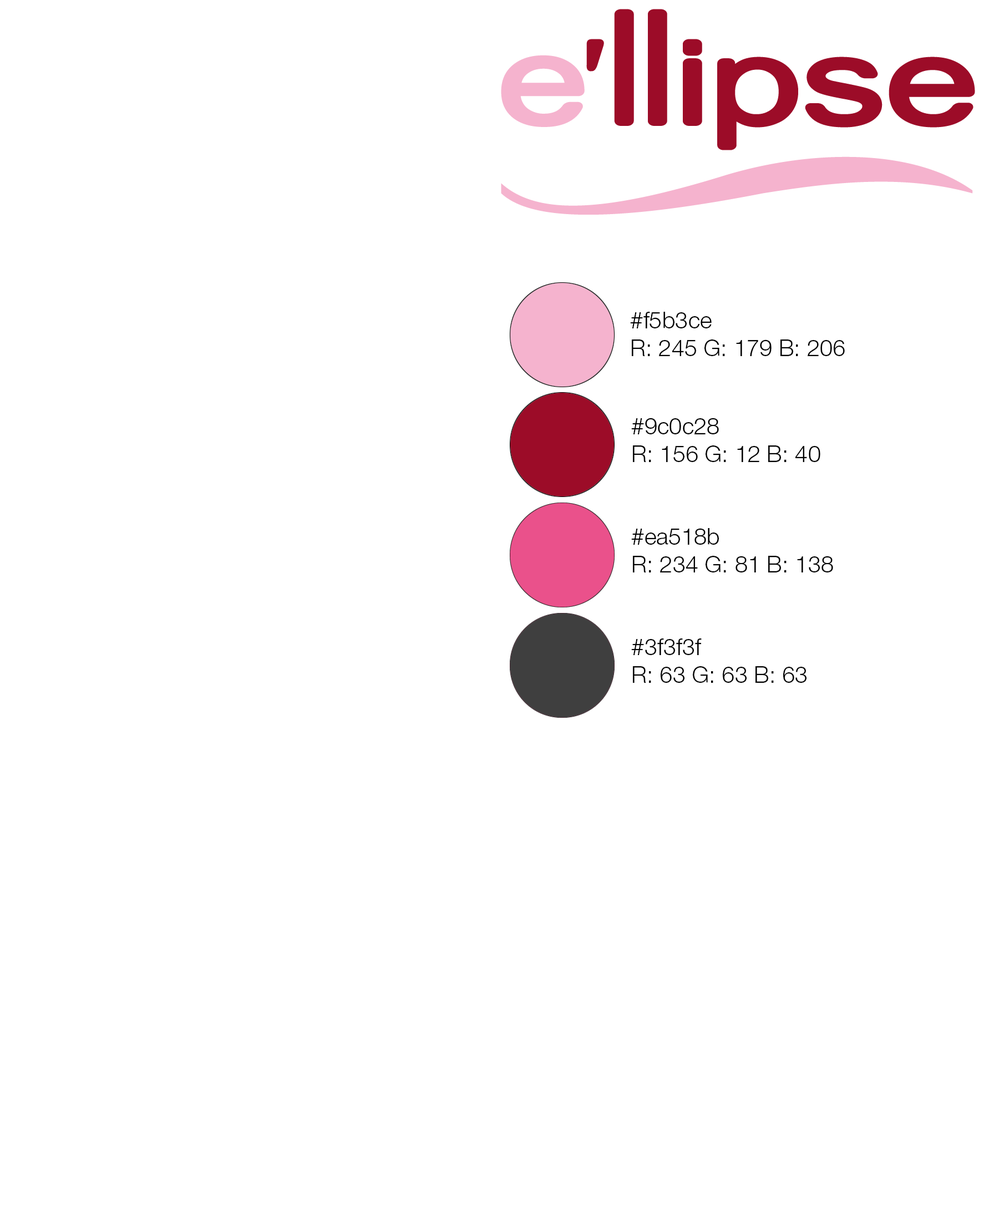
<style>
.page{position:relative;width:984px;height:1212px;background:#ffffff}
.page>*{position:absolute;margin:0}
.t1{font:23.1px "HelveticaNeueCyr-Light";color:#000000}
</style>
<div class="page">
<p class="t1" style="left:630px;top:312px;width:215px;height:44px">#f5b3ce<br>R: 245 G: 179 B: 206</p>
<p class="t1" style="left:631px;top:418px;width:189px;height:44px">#9c0c28<br>R: 156 G: 12 B: 40</p>
<p class="t1" style="left:631px;top:528px;width:202px;height:44px">#ea518b<br>R: 234 G: 81 B: 138</p>
<p class="t1" style="left:631px;top:638px;width:175px;height:45px">#3f3f3f<br>R: 63 G: 63 B: 63</p>
</div>
